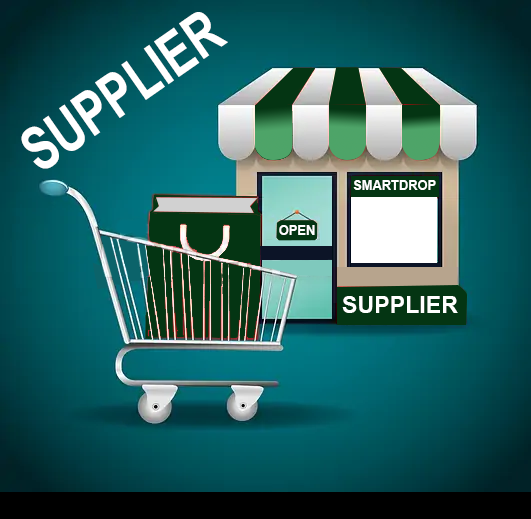
<style>
.page{position:relative;width:531px;height:519px}
.page>*{position:absolute;margin:0}
.t1{font:60.6px "Arial-BoldMT";color:#ffffff;scale:0.76 1}
.t2{font:13.8px "Arial-BoldMT";color:#ffffff;scale:0.94 1}
.t3{font:22.7px "Arial-BoldMT";color:#ffffff}
</style>
<div class="page">
<p class="t1" style="left:21px;top:12px;width:207px;height:157px;rotate:-35deg">SUPPLIER</p>
<p class="t2" style="left:353px;top:180px;width:83px;height:10px">SMARTDROP</p>
<p class="t2" style="left:279px;top:225px;width:36px;height:10px">OPEN</p>
<p class="t3" style="left:342px;top:296px;width:116px;height:17px">SUPPLIER</p>
</div>
